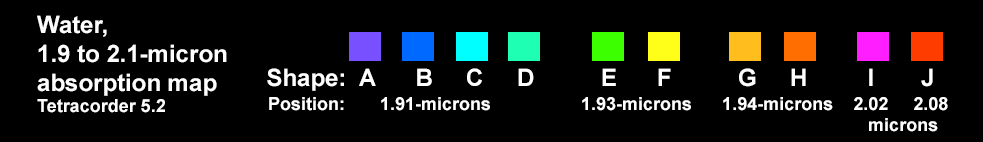
<style>
.page{position:relative;width:983px;height:142px;background:#000000}
.page>*{position:absolute;margin:0}
.t1{font:24px "Arial-BoldMT";color:#fefefe}
.t2{font:18px "Arial-BoldMT";color:#fefefe}
.t3{font:24px "Arial-BoldMT";color:#ffffff}
.t4{font:18px "Arial-BoldMT";color:#ffffff}
</style>
<div class="page">
<p class="t1" style="left:37px;top:15px;width:190px;height:98px">Water, <br>1.9 to 2.1-micron <br>absorption map<br><span class="t2">Tetracorder 5.2</span></p>
<p class="t3" style="left:267px;top:68px;width:666px;height:23px">Shape:  A      B     C     D          E      F          G     H         I       J</p>
<p class="t4" style="left:269px;top:97px;width:679px;height:35px">Position:       1.91-microns                  1.93-microns      1.94-microns    2.02     2.08<br>                                                                                                                        microns</p>
</div>
